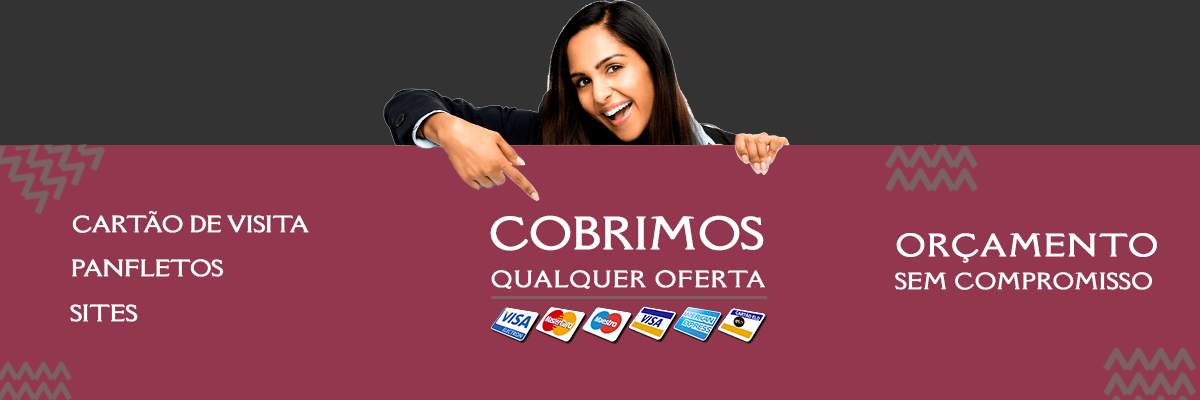
<style>
.page{position:relative;width:1200px;height:400px;background:#92374d}
.page>*{position:absolute;margin:0}
.t1{font:20.4px "DellaRespira-Regular";color:#ffffff;text-transform:uppercase;font-weight:bold;scale:1.11 1}
.t2{font:40.8px "DellaRespira-Regular";color:#ffffff;text-transform:uppercase;font-weight:bold;scale:1.11 1}
.t3{font:28.4px "DellaRespira-Regular";letter-spacing:0.05em;color:#ffffff;text-transform:uppercase;font-weight:bold;scale:1.11 1}
.t4{font:20.4px "DellaRespira-Regular";letter-spacing:0.055em;color:#ffffff;text-transform:uppercase;font-weight:bold;scale:1.11 1}
.t5{font:20.4px "DellaRespira-Regular";letter-spacing:0.012em;color:#ffffff;text-transform:uppercase;font-weight:bold;scale:1.11 1}
</style>
<div class="page">
<p class="t1" style="left:72px;top:210px;width:237px;height:23px">Cartão de visita</p>
<p class="t2" style="left:490px;top:215px;width:274px;height:36px">cobrimos</p>
<p class="t3" style="left:896px;top:233px;width:261px;height:30px">orçamento</p>
<p class="t1" style="left:72px;top:259px;width:152px;height:18px">panfletos</p>
<p class="t4" style="left:491px;top:270px;width:274px;height:19px">qualquer oferta</p>
<p class="t5" style="left:895px;top:272px;width:258px;height:18px">sem compromisso</p>
<p class="t1" style="left:70px;top:304px;width:68px;height:18px">sites</p>
</div>
